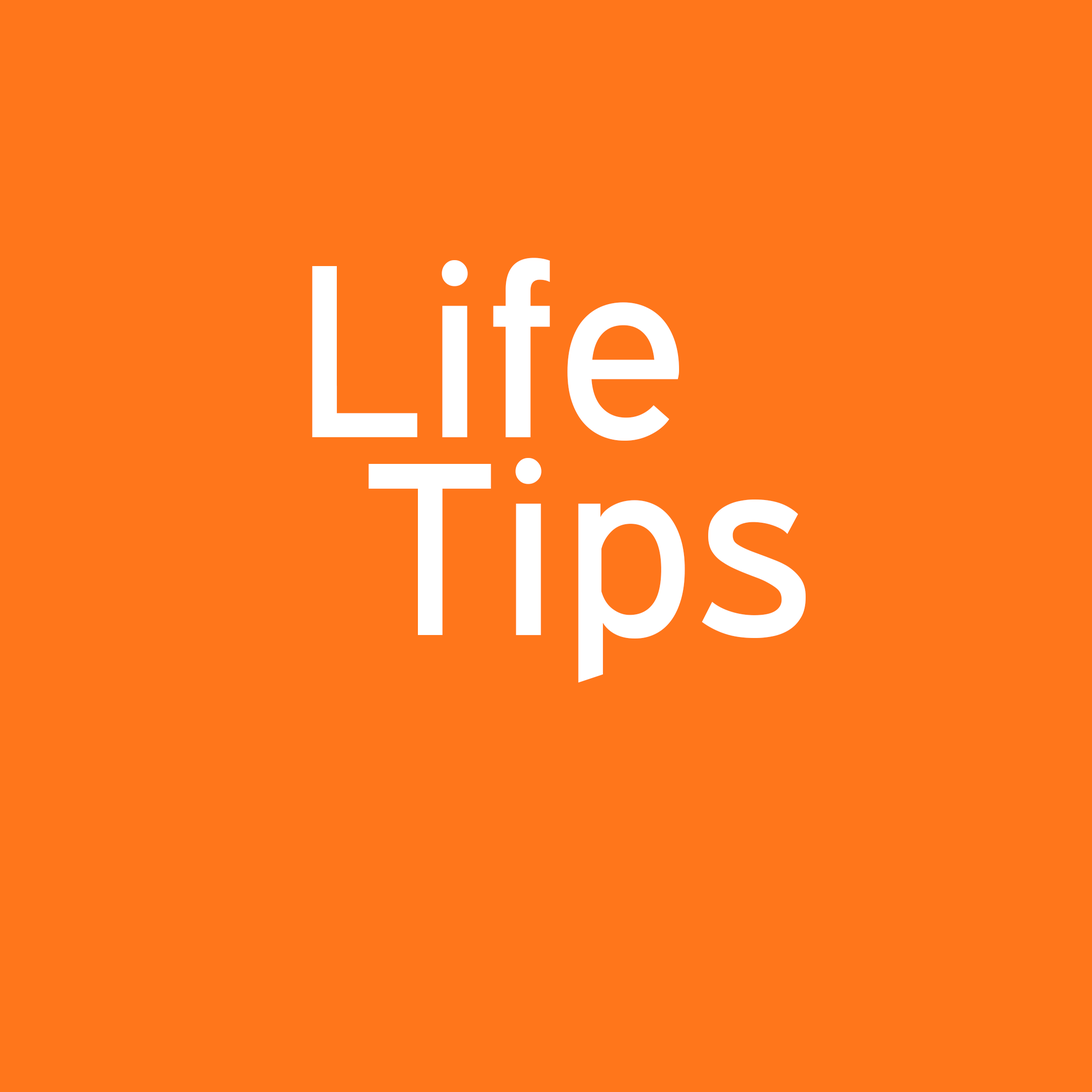
<style>
.page{position:relative;width:1092px;height:1092px;background:#ff761b}
.page>*{position:absolute;margin:0}
.t1{font:247.3px "ExpresswayRg-Regular";color:#ffffff}
</style>
<div class="page">
<p class="t1" style="left:312px;top:258px;width:367px;height:183px">Life</p>
<p class="t1" style="left:368px;top:458px;width:438px;height:224px">Tips</p>
</div>
